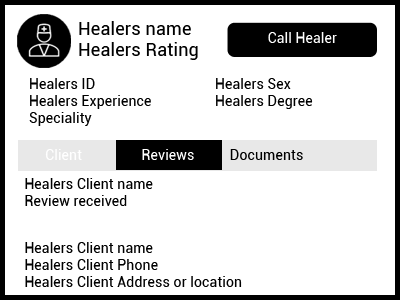
<style>
.page{position:relative;width:400px;height:300px;background:#ffffff}
.page>*{position:absolute;margin:0}
.t1{font:18px "Roboto-Regular";letter-spacing:0.01em;color:#000000}
.t2{font:14px "Roboto-Regular";letter-spacing:0.01em;color:#ffffff}
.t3{font:14px "Roboto-Regular";letter-spacing:0.01em;color:#000000}
</style>
<div class="page">
<p class="t1" style="left:79px;top:21px;width:119px;height:39px">Healers name<br>Healers Rating</p>
<p class="t2" style="left:268px;top:32px;width:69px;height:11px">Call Healer</p>
<p class="t3" style="left:29px;top:78px;width:122px;height:48px">Healers ID<br>Healers Experience<br>Speciality</p>
<p class="t3" style="left:216px;top:78px;width:97px;height:31px">Healers Sex<br>Healers Degree</p>
<p class="t2" style="left:45px;top:149px;width:37px;height:11px">Client</p>
<p class="t2" style="left:142px;top:149px;width:52px;height:11px">Reviews</p>
<p class="t3" style="left:230px;top:149px;width:73px;height:11px">Documents</p>
<p class="t3" style="left:25px;top:178px;width:128px;height:28px">Healers Client name<br>Review received</p>
<p class="t3" style="left:25px;top:242px;width:217px;height:45px">Healers Client name<br>Healers Client Phone<br>Healers Client Address or location</p>
</div>
